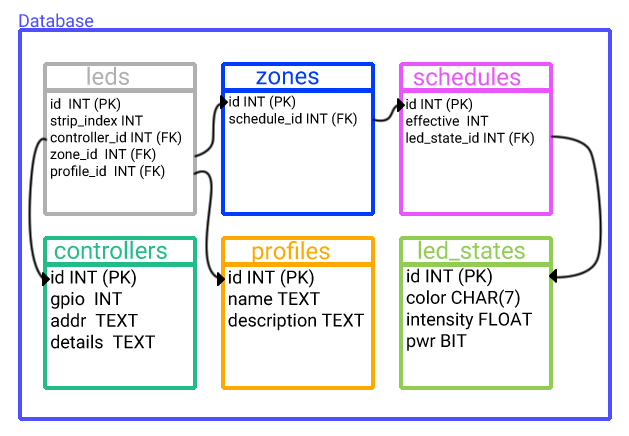
<style>
.page{position:relative;width:629px;height:436px;background:#ffffff}
.page>*{position:absolute;margin:0}
.t1{font:14px "Roboto-Regular";color:#000000}
.t2{font:18px "Roboto-Regular";color:#000000}
</style>
<div class="page">
<p class="t1" style="left:50px;top:97px;width:131px;height:83px">id  INT (PK)<br>strip_index INT<br>controller_id INT (FK)<br>zone_id  INT (FK)<br>profile_id  INT (FK)</p>
<p class="t1" style="left:229px;top:95px;width:128px;height:32px">id INT (PK)<br>schedule_id INT (FK)</p>
<p class="t1" style="left:406px;top:97px;width:128px;height:49px">id INT (PK)<br>effective  INT<br>led_state_id INT (FK)</p>
<p class="t2" style="left:51px;top:269px;width:104px;height:80px">id INT (PK)<br>gpio  INT<br>addr  TEXT<br>details  TEXT</p>
<p class="t2" style="left:228px;top:269px;width:136px;height:62px">id INT (PK)<br>name TEXT<br>description TEXT</p>
<p class="t2" style="left:406px;top:267px;width:126px;height:84px">id INT (PK)<br>color CHAR(7)<br>intensity FLOAT<br>pwr BIT</p>
</div>
